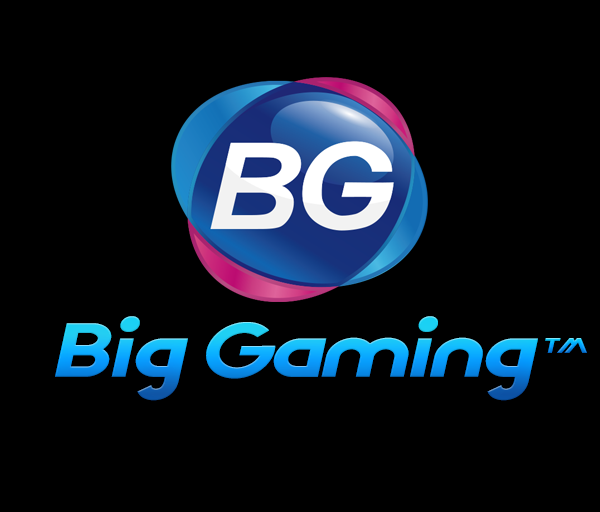
<style>
.page{position:relative;width:600px;height:512px;background:#000000}
.page>*{position:absolute;margin:0}
.t1{font:93.6px "Wattauchimma";letter-spacing:-0.065em;font-weight:bold;font-style:italic;scale:1.21 1}
.t2{font:25.7px "Wattauchimma";letter-spacing:-0.065em;font-weight:bold;font-style:italic;scale:1.22 1}
</style>
<div class="page">
<p class="t1" style="left:55px;top:316px;width:483px;height:85px">Big Gaming</p>
<p class="t2" style="left:545px;top:338px;width:42px;height:15px">TM</p>
</div>
